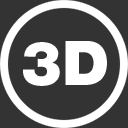
<style>
.page{position:relative;width:128px;height:128px;background:#333333}
.page>*{position:absolute;margin:0}
.t1{font:61px "HelveticaNeue-Black";color:#ffffff}
</style>
<div class="page">
<p class="t1" style="left:23px;top:41px;width:84px;height:45px">3D</p>
</div>
